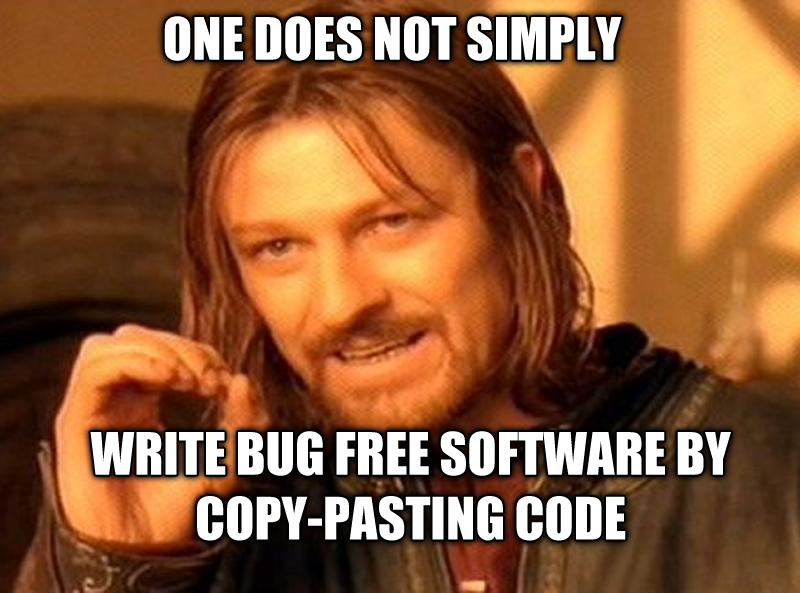
<style>
.page{position:relative;width:800px;height:593px}
.page>*{position:absolute;margin:0}
.t1{font:54px "Impact";color:#ffffff}
</style>
<div class="page">
<p class="t1" style="left:164px;top:16px;width:458px;height:45px">ONE DOES NOT SIMPLY</p>
<p class="t1" style="left:90px;top:431px;width:641px;height:110px;text-align:center">WRITE BUG FREE SOFTWARE BY COPY-PASTING CODE</p>
</div>
